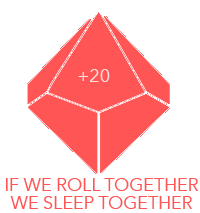
<style>
.page{position:relative;width:200px;height:213px;background:#ffffff}
.page>*{position:absolute;margin:0}
.t1{font:18px "AvenirNext-Regular";color:#ffdddd}
.t2{font:18px/18px "AvenirNext-Regular";color:#ff5555}
</style>
<div class="page">
<p class="t1" style="left:78px;top:69px;width:32px;height:13px">+20</p>
<p class="t2" style="left:6px;top:178px;width:193px;height:31px;text-align:center">IF WE ROLL TOGETHER<br>WE SLEEP TOGETHER</p>
</div>
